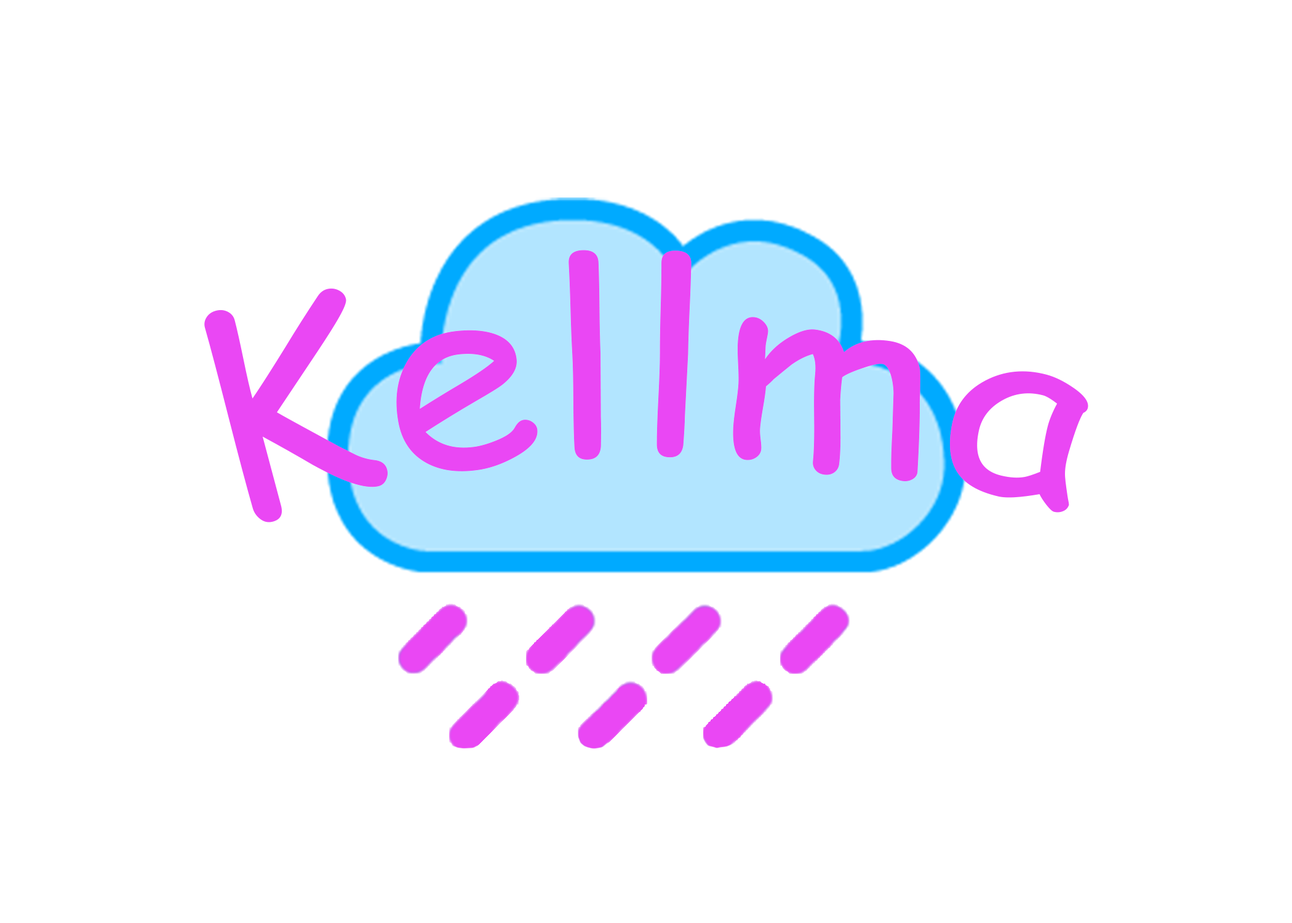
<style>
.page{position:relative;width:1292px;height:923px;background:#ffffff}
.page>*{position:absolute;margin:0}
.t1{font:256.4px "ComicSansMS";letter-spacing:0.025em;color:#ea47f4}
</style>
<div class="page">
<p class="t1" style="left:204px;top:250px;width:884px;height:272px">Kellma</p>
</div>
